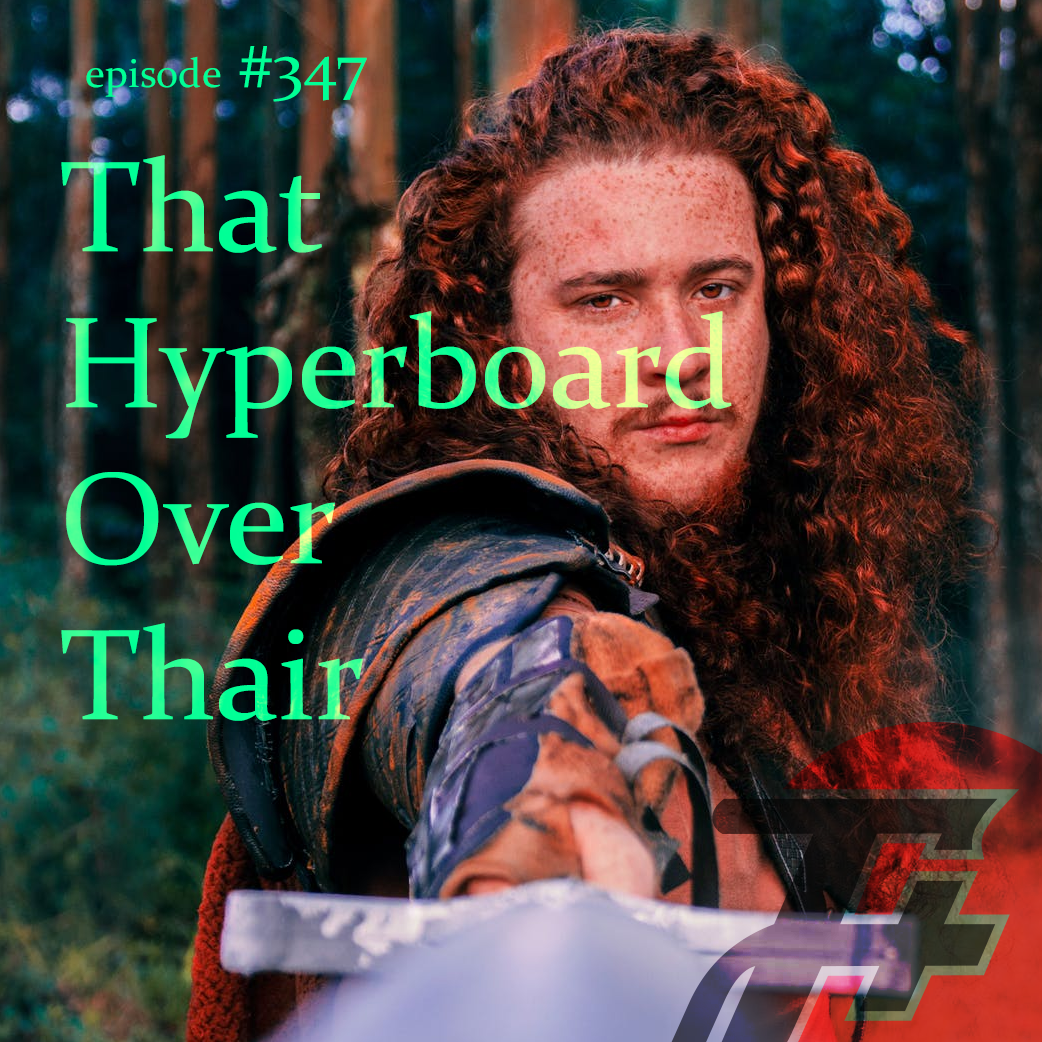
<style>
.page{position:relative;width:1042px;height:1042px}
.page>*{position:absolute;margin:0}
.t1{font:41px "Constantia";color:#00ff96}
.t2{font:65px "Constantia";color:#00ff96}
.t3{font:130px "Constantia"}
</style>
<div class="page">
<p class="t1" style="left:86px;top:46px;width:281px;height:56px">episode<span class="t2"> #347</span></p>
<p class="t3" style="left:61px;top:155px;width:671px;height:566px">That<br>Hyperboard<br>Over  <br>Thair</p>
</div>
